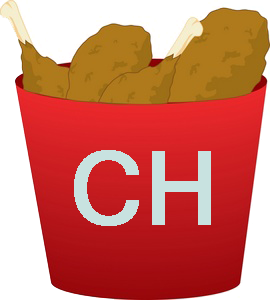
<style>
.page{position:relative;width:270px;height:300px;background:#ffffff}
.page>*{position:absolute;margin:0}
.t1{font:100px "MicrosoftSansSerif";color:#c8e2e0;font-weight:bold}
</style>
<div class="page">
<p class="t1" style="left:74px;top:150px;width:137px;height:76px">CH</p>
</div>
